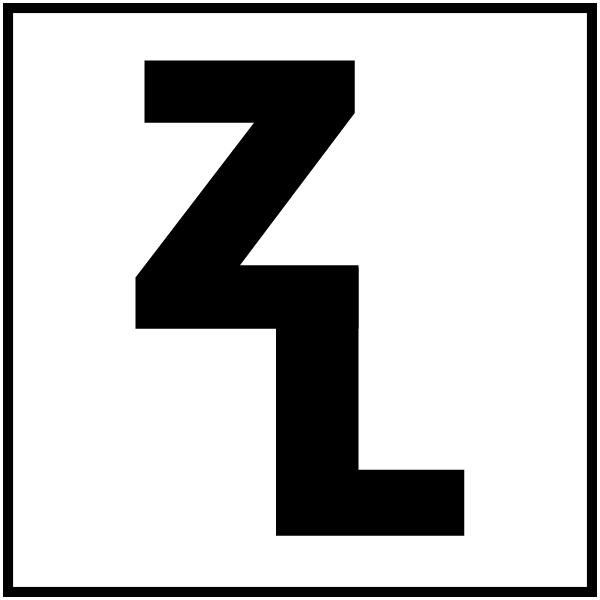
<style>
.page{position:relative;width:600px;height:600px;background:#ffffff}
.page>*{position:absolute;margin:0}
.t1{font:401.9px "FranklinGothic-Heavy";color:#000000}
</style>
<div class="page">
<p class="t1" style="left:135px;top:60px;width:224px;height:269px">Z</p>
<p class="t1" style="left:276px;top:267px;width:189px;height:269px">LZ</p>
</div>
